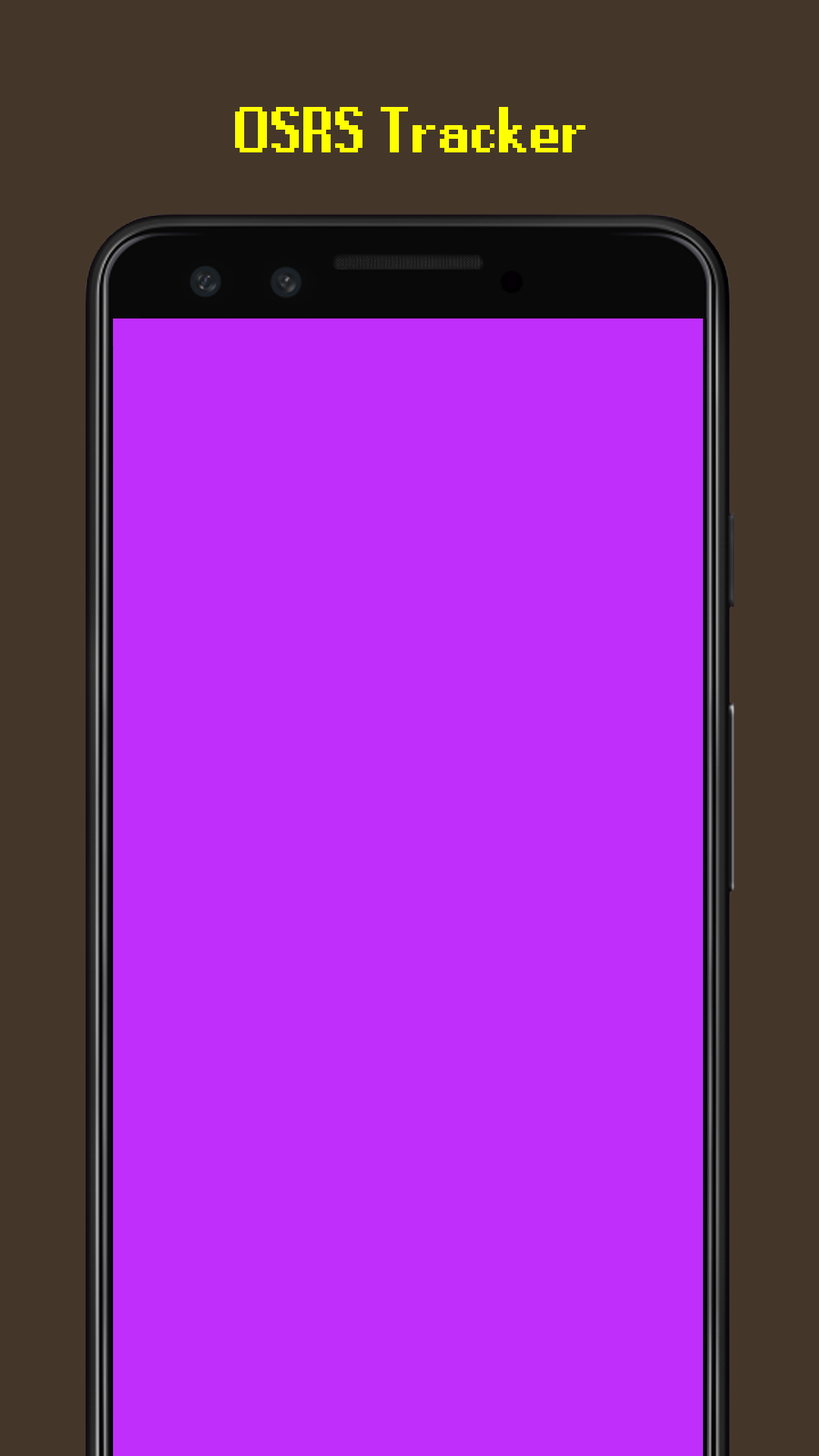
<style>
.page{position:relative;width:819px;height:1456px;background:#bf2efb}
.page>*{position:absolute;margin:0}
.t1{font:72.8px "RuneScape-UF";color:#ffff00}
</style>
<div class="page">
<p class="t1" style="left:235px;top:107px;width:350px;height:45px">OSRS Tracker</p>
</div>
